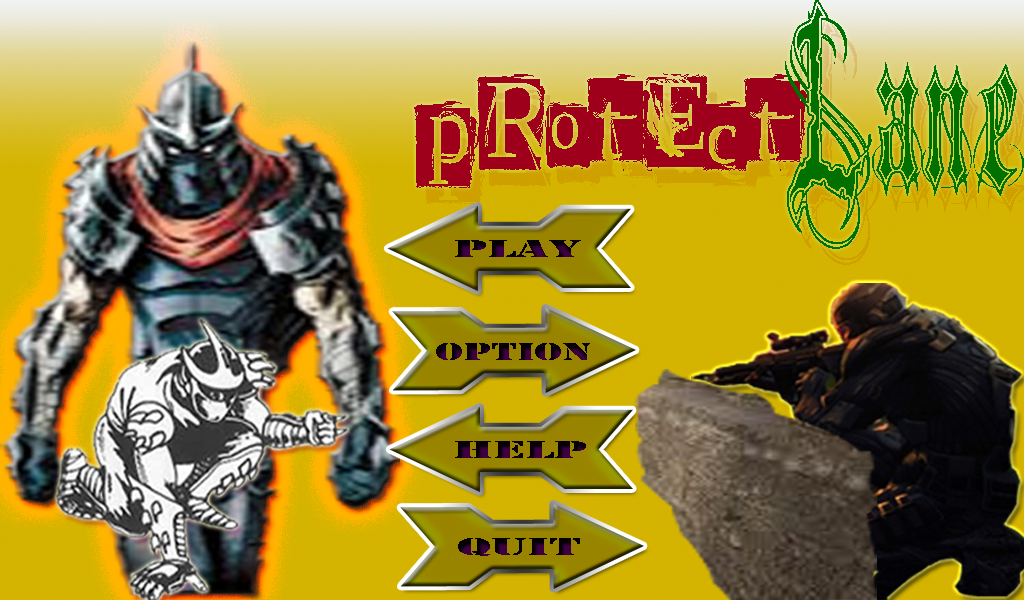
<style>
.page{position:relative;width:1024px;height:600px}
.page>*{position:absolute;margin:0}
.t1{font:25.8px "Stencil";scale:2.08 1}
.t2{font:24.7px "Stencil";scale:1.77 1}
</style>
<div class="page">
<p class="t1" style="left:455px;top:240px;width:126px;height:17px">PLAY</p>
<p class="t2" style="left:436px;top:343px;width:154px;height:17px">OPTION</p>
<p class="t1" style="left:455px;top:441px;width:131px;height:17px">Help</p>
<p class="t1" style="left:458px;top:538px;width:122px;height:18px">Quit</p>
</div>
